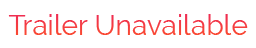
<style>
.page{position:relative;width:256px;height:48px;background:#ffffff}
.page>*{position:absolute;margin:0}
.t1{font:28.2px "Raleway-Regular";color:#f53d3f}
</style>
<div class="page">
<p class="t1" style="left:8px;top:14px;width:240px;height:21px">Trailer Unavailable</p>
</div>
